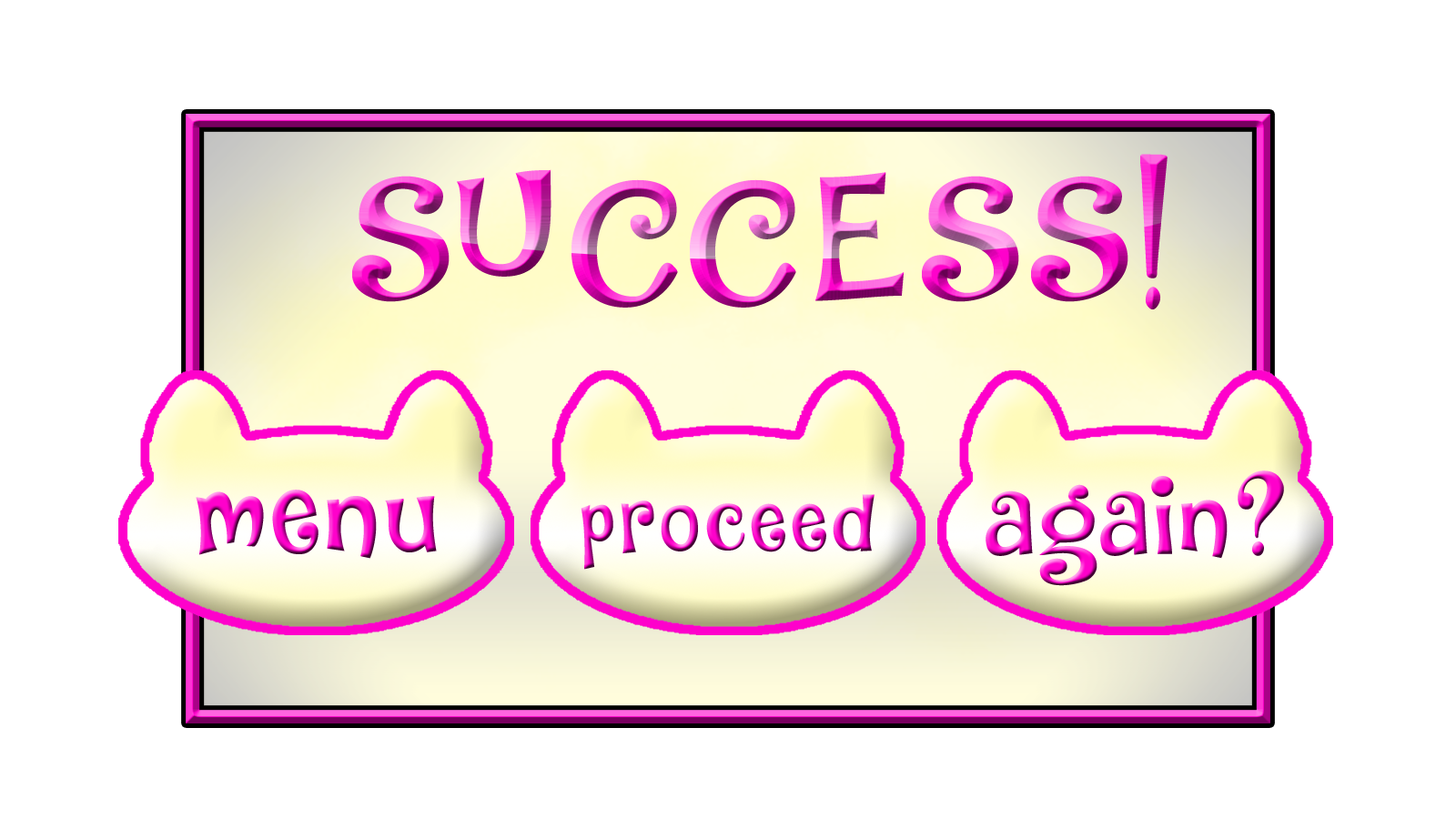
<style>
.page{position:relative;width:1456px;height:819px;background:#ffffff}
.page>*{position:absolute;margin:0}
.t1{font:182px "DKJambo";letter-spacing:0.05em}
.t2{font:102.1px "DKJambo";letter-spacing:0.05em}
.t3{font:109.7px "DKJambo";letter-spacing:0.05em}
.t4{font:81.7px "DKJambo";letter-spacing:0.05em}
</style>
<div class="page">
<p class="t1" style="left:352px;top:154px;width:816px;height:156px">SUCCESS!</p>
<p class="t2" style="left:986px;top:470px;width:298px;height:116px">again?</p>
<p class="t3" style="left:196px;top:490px;width:241px;height:69px">menu</p>
<p class="t4" style="left:581px;top:494px;width:293px;height:76px">proceed</p>
</div>
